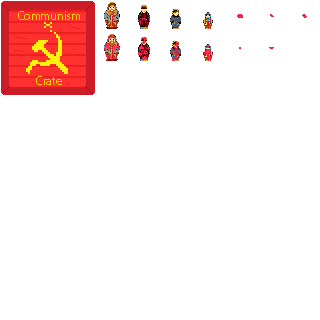
<style>
.page{position:relative;width:320px;height:320px;background:#ffffff}
.page>*{position:absolute;margin:0}
.t1{font:12px "MyriadPro-Regular";color:#ffd200}
</style>
<div class="page">
<p class="t1" style="left:18px;top:11px;width:62px;height:9px">Communism</p>
<p class="t1" style="left:36px;top:76px;width:26px;height:9px">Crate</p>
</div>
